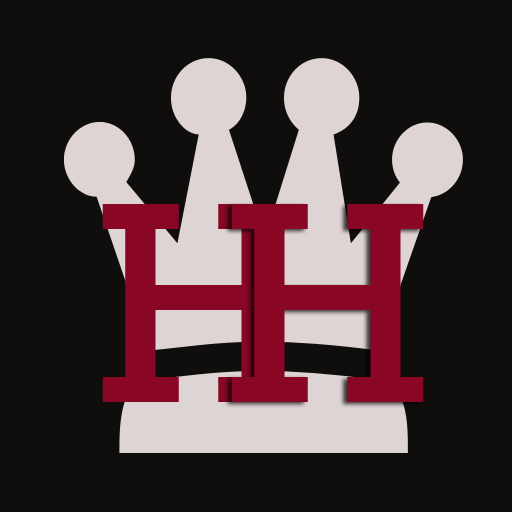
<style>
.page{position:relative;width:512px;height:512px;background:#100d0d}
.page>*{position:absolute;margin:0}
.t1{font:291.6px "Rockwell";color:#890725}
</style>
<div class="page">
<p class="t1" style="left:102px;top:204px;width:193px;height:198px">H</p>
<p class="t1" style="left:231px;top:204px;width:193px;height:198px">H</p>
</div>
